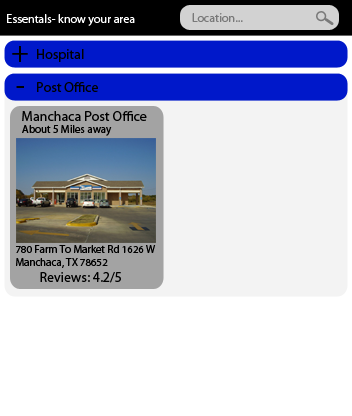
<style>
.page{position:relative;width:352px;height:416px;background:#ffffff}
.page>*{position:absolute;margin:0}
.t1{font:12px "MyriadPro-Regular";color:#ffffff}
.t2{font:12px "MyriadPro-Regular";color:#797979}
.t3{font:30px "MyriadPro-Regular";color:#000000}
.t4{font:14px "MyriadPro-Regular";color:#000000}
.t5{font:11px "MyriadPro-Regular";color:#000000}
.t6{font:10.9px "MyriadPro-Regular";color:#000000}
</style>
<div class="page">
<p class="t1" style="left:7px;top:14px;width:128px;height:12px">Essentals- know your area</p>
<p class="t2" style="left:192px;top:13px;width:51px;height:9px">Location...</p>
<p class="t3" style="left:12px;top:46px;width:16px;height:16px">+</p>
<p class="t4" style="left:37px;top:49px;width:47px;height:13px">Hospital</p>
<p class="t3" style="left:16px;top:86px;width:8px;height:2px">-</p>
<p class="t4" style="left:37px;top:82px;width:61px;height:10px">Post Office</p>
<p class="t4" style="left:22px;top:111px;width:125px;height:10px">Manchaca Post Office</p>
<p class="t5" style="left:22px;top:125px;width:90px;height:11px">About 5 Miles away</p>
<p class="t6" style="left:16px;top:245px;width:140px;height:23px">780 Farm To Market Rd 1626 W<br>Manchaca, TX 78652</p>
<p class="t4" style="left:40px;top:272px;width:81px;height:11px">Reviews: 4.2/5</p>
</div>
